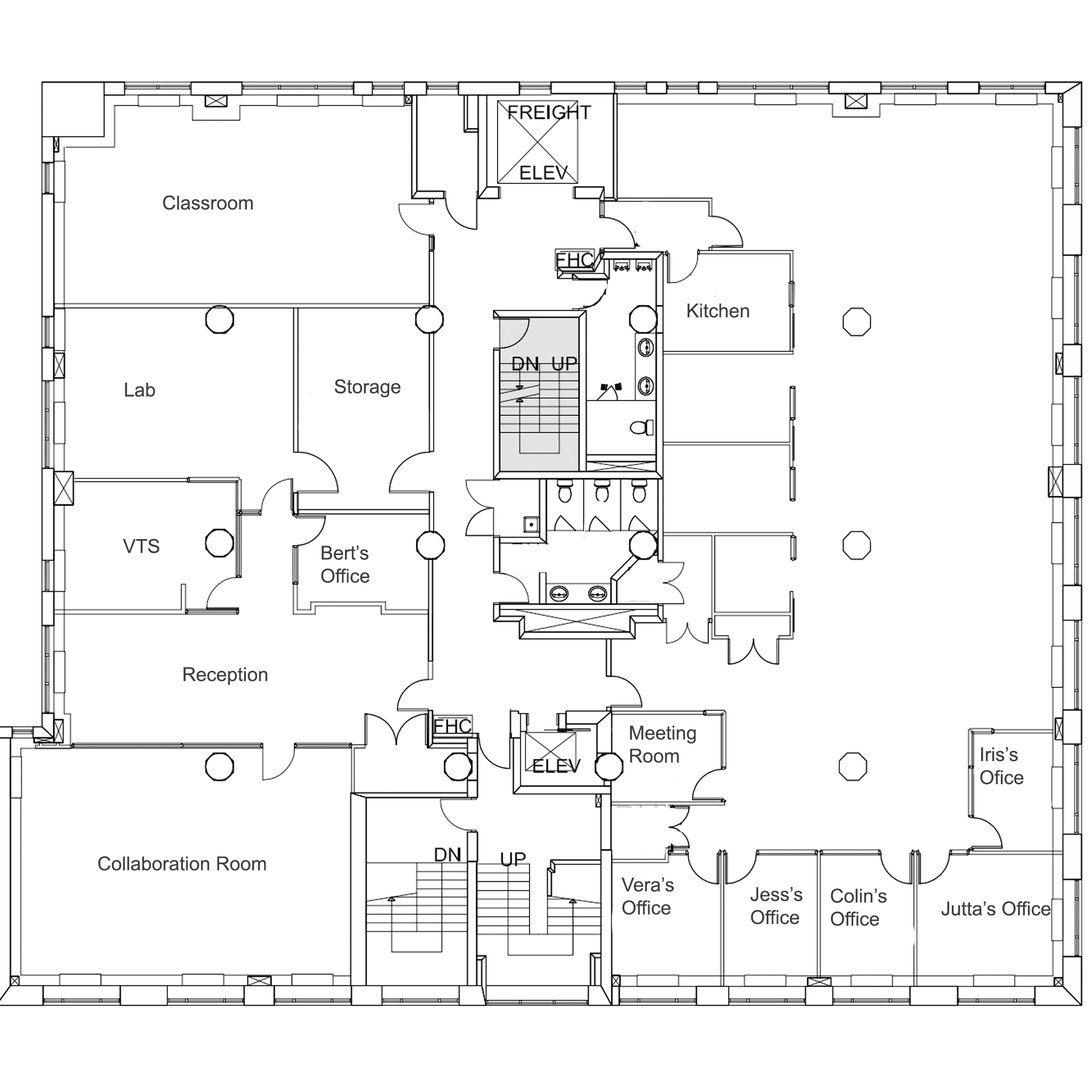
<style>
.page{position:relative;width:1092px;height:1092px;background:#ffffff}
.page>*{position:absolute;margin:0}
.t1{font:19.2px "ArialMT";color:#3e3e3e}
</style>
<div class="page">
<p class="t1" style="left:163px;top:195px;width:90px;height:15px">Classroom</p>
<p class="t1" style="left:687px;top:303px;width:62px;height:15px">Kitchen</p>
<p class="t1" style="left:125px;top:382px;width:30px;height:15px">Lab</p>
<p class="t1" style="left:334px;top:379px;width:66px;height:19px">Storage</p>
<p class="t1" style="left:123px;top:539px;width:36px;height:14px">VTS</p>
<p class="t1" style="left:321px;top:545px;width:49px;height:38px">Bert’s<br>Office</p>
<p class="t1" style="left:183px;top:667px;width:85px;height:18px">Reception</p>
<p class="t1" style="left:630px;top:726px;width:66px;height:37px">Meeting<br>Room</p>
<p class="t1" style="left:980px;top:747px;width:44px;height:37px">Iris’s<br>Ofice</p>
<p class="t1" style="left:98px;top:856px;width:168px;height:15px">Collaboration Room</p>
<p class="t1" style="left:621px;top:877px;width:53px;height:38px">Vera’s<br>Office</p>
<p class="t1" style="left:750px;top:887px;width:52px;height:38px">Jess’s<br>Office</p>
<p class="t1" style="left:831px;top:888px;width:56px;height:38px">Colin’s<br>Office</p>
<p class="t1" style="left:941px;top:901px;width:110px;height:15px">Jutta’s Office</p>
</div>
